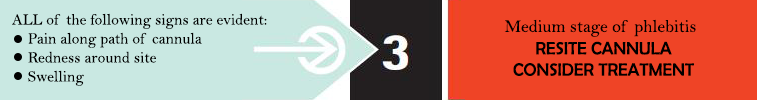
<style>
.page{position:relative;width:757px;height:100px;background:#ef4426}
.page>*{position:absolute;margin:0}
.t1{font:15.8px "BellMT";color:#000000}
.t2{font:17.8px "BellMT";color:#000000}
.t3{font:17.8px "BerlinSansFB-Reg";color:#000000}
</style>
<div class="page">
<p class="t1" style="left:12px;top:13px;width:255px;height:73px">ALL of the following signs are evident:<br>    Pain along path of cannula<br>    Redness around site<br>    Swelling</p>
<p class="t2" style="left:504px;top:19px;width:192px;height:18px">Medium stage of phlebitis</p>
<p class="t3" style="left:513px;top:41px;width:181px;height:35px;text-align:center">RESITE CANNULA<br>CONSIDER TREATMENT</p>
</div>
